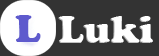
<style>
.page{position:relative;width:159px;height:56px;background:#333333}
.page>*{position:absolute;margin:0}
.t1{font:40px "CooperBlack";color:#5e5acd}
.t2{font:40px "CooperBlack";color:#ffffff}
</style>
<div class="page">
<p class="t1" style="left:15px;top:15px;width:26px;height:27px">L</p>
<p class="t2" style="left:58px;top:16px;width:95px;height:27px">Luki</p>
</div>
